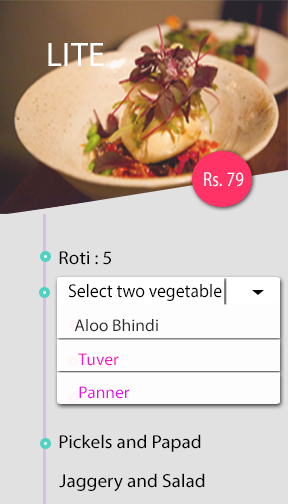
<style>
.page{position:relative;width:288px;height:504px;background:#e2e1e1}
.page>*{position:absolute;margin:0}
.t1{font:34px "MyriadPro-Regular";letter-spacing:0.015em;color:#ffffff}
.t2{font:20.2px "MyriadPro-Regular";letter-spacing:0.015em;color:#ffffff;scale:0.82 1}
.t3{font:18.8px "MyriadPro-Regular";color:#000000}
.t4{font:18.4px "MyriadPro-Regular";color:#000000;scale:0.96 1}
.t5{font:17px "MyriadPro-Regular";color:#2b2b2b}
.t6{font:17px "MyriadPro-Regular";color:#f617ba}
.t7{font:17px "MyriadPro-Regular";color:#e30fe6}
</style>
<div class="page">
<p class="t1" style="left:48px;top:43px;width:56px;height:23px">LITE</p>
<p class="t2" style="left:204px;top:172px;width:40px;height:15px">Rs. 79</p>
<p class="t3" style="left:59px;top:251px;width:52px;height:14px">Roti : 5</p>
<p class="t4" style="left:68px;top:284px;width:154px;height:17px">Select two vegetable</p>
<p class="t5" style="left:74px;top:319px;width:84px;height:13px">Aloo Bhindi</p>
<p class="t6" style="left:78px;top:353px;width:41px;height:13px">Tuver</p>
<p class="t7" style="left:79px;top:386px;width:51px;height:13px">Panner</p>
<p class="t3" style="left:59px;top:434px;width:142px;height:18px">Pickels and Papad</p>
<p class="t3" style="left:59px;top:473px;width:146px;height:19px">Jaggery and Salad</p>
</div>
